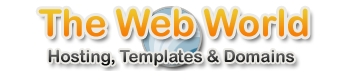
<style>
.page{position:relative;width:341px;height:71px;background:#ffffff}
.page>*{position:absolute;margin:0}
.t1{font:37.5px "ArialRoundedMTBold"}
.t2{font:16.7px "ArialRoundedMTBold"}
</style>
<div class="page">
<p class="t1" style="left:38px;top:8px;width:270px;height:29px">The Web World</p>
<p class="t2" style="left:48px;top:49px;width:246px;height:17px">Hosting, Templates &amp; Domains</p>
</div>
